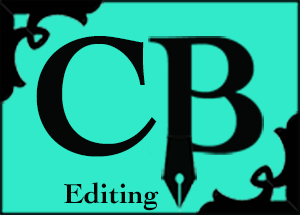
<style>
.page{position:relative;width:300px;height:215px;background:#30eac9}
.page>*{position:absolute;margin:0}
.t1{font:174.5px "Cochin-Bold";color:#040706}
.t2{font:29.1px "Cochin-Bold";color:#040706}
</style>
<div class="page">
<p class="t1" style="left:36px;top:36px;width:121px;height:121px">C</p>
<p class="t2" style="left:64px;top:182px;width:95px;height:29px">Editing</p>
</div>
